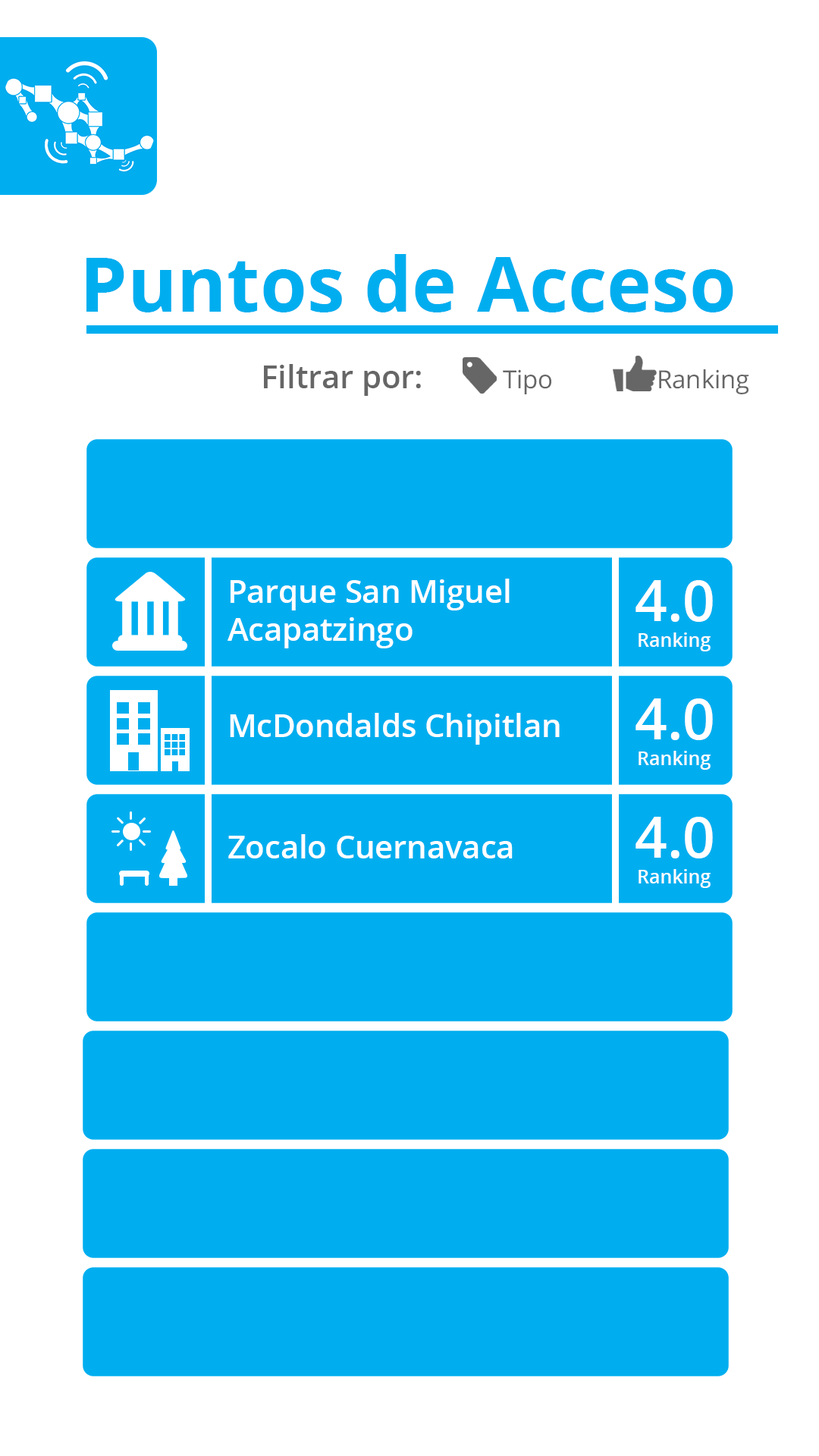
<style>
.page{position:relative;width:819px;height:1456px;background:#ffffff}
.page>*{position:absolute;margin:0}
.t1{font:75.8px "OpenSans-Bold";color:#00aeef}
.t2{font:31.6px "OpenSans-Semibold";color:#666666}
.t3{font:25px "OpenSans";color:#666666}
.t4{font:31.6px "OpenSans-Semibold";color:#ffffff}
.t5{font:56.9px "OpenSans-Semibold";color:#ffffff}
.t6{font:19px "OpenSans-Semibold";color:#ffffff}
</style>
<div class="page">
<p class="t1" style="left:86px;top:254px;width:647px;height:58px">Puntos de Acceso</p>
<p class="t2" style="left:264px;top:364px;width:157px;height:32px">Filtrar por:</p>
<p class="t3" style="left:503px;top:369px;width:48px;height:25px">Tipo</p>
<p class="t3" style="left:659px;top:369px;width:90px;height:25px">Ranking</p>
<p class="t4" style="left:227px;top:579px;width:283px;height:69px">Parque San Miguel Acapatzingo</p>
<p class="t5" style="left:635px;top:580px;width:78px;height:42px">4.0</p>
<p class="t6" style="left:639px;top:632px;width:72px;height:19px">Ranking</p>
<p class="t5" style="left:635px;top:698px;width:78px;height:42px">4.0</p>
<p class="t4" style="left:230px;top:713px;width:330px;height:32px">McDondalds Chipitlan</p>
<p class="t6" style="left:639px;top:751px;width:72px;height:19px">Ranking</p>
<p class="t5" style="left:635px;top:817px;width:78px;height:41px">4.0</p>
<p class="t4" style="left:228px;top:834px;width:285px;height:24px">Zocalo Cuernavaca</p>
<p class="t6" style="left:639px;top:869px;width:72px;height:19px">Ranking</p>
</div>
